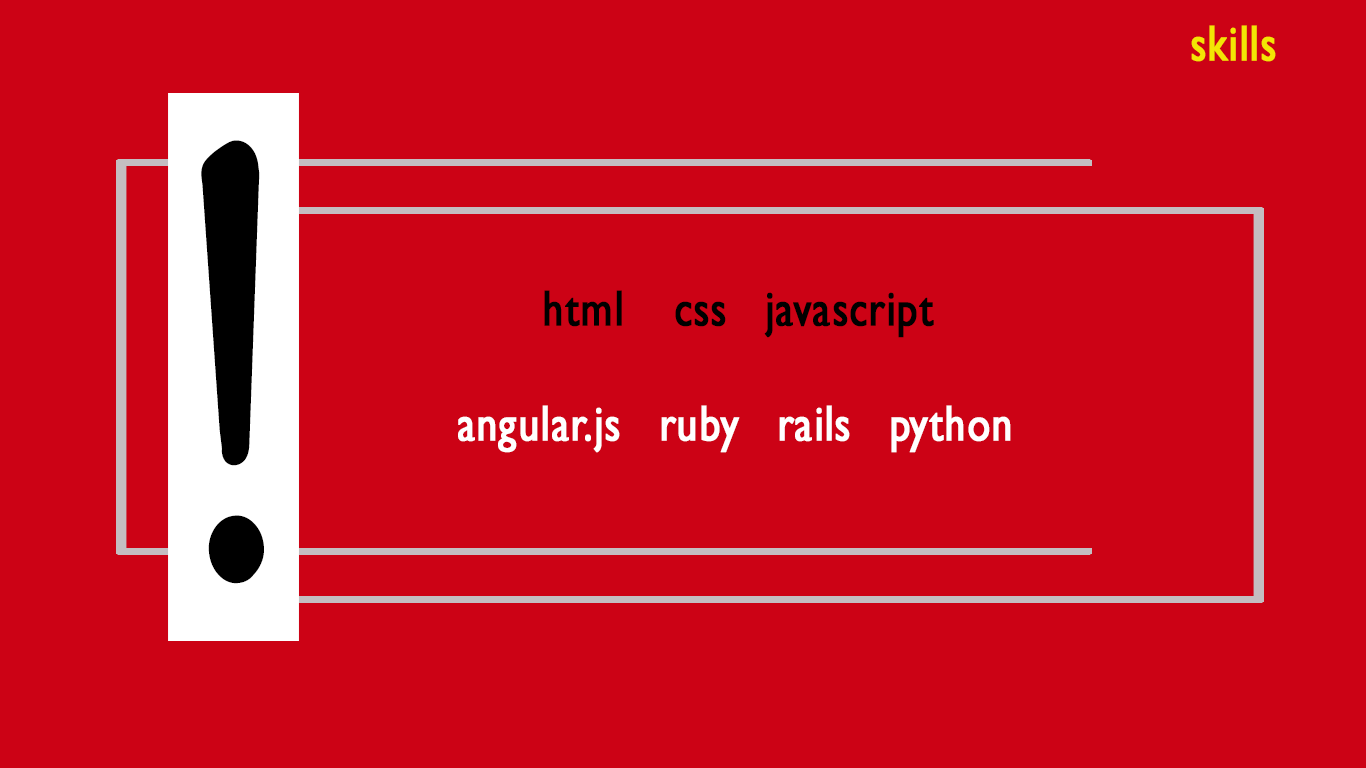
<style>
.page{position:relative;width:1366px;height:768px;background:#cc0215}
.page>*{position:absolute;margin:0}
.t1{font:50.4px "GillSansMT";letter-spacing:0.01em;color:#f3e504;font-weight:bold;scale:0.81 1}
.t2{font:630px "LTCKennerley-Swash";letter-spacing:0.01em;color:#000000;font-weight:bold;scale:0.81 1}
.t3{font:50.4px "GillSansMT";letter-spacing:0.01em;color:#000000;font-weight:bold;scale:0.81 1}
.t4{font:50.4px "GillSansMT";letter-spacing:0.01em;color:#ffffff;font-weight:bold;scale:0.81 1}
</style>
<div class="page">
<p class="t1" style="left:1191px;top:25px;width:85px;height:37px">skills</p>
<p class="t2" style="left:201px;top:140px;width:63px;height:444px;rotate:-7deg">!</p>
<p class="t3" style="left:544px;top:290px;width:390px;height:48px">html    css   javascript</p>
<p class="t4" style="left:458px;top:405px;width:553px;height:48px">angular.js   ruby   rails   python</p>
</div>
